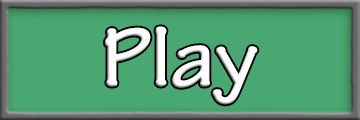
<style>
.page{position:relative;width:360px;height:120px;background:#49a771}
.page>*{position:absolute;margin:0}
.t1{font:90.4px "TektonPro-Bold";color:#ffffff}
</style>
<div class="page">
<p class="t1" style="left:105px;top:26px;width:153px;height:79px">Play</p>
</div>
